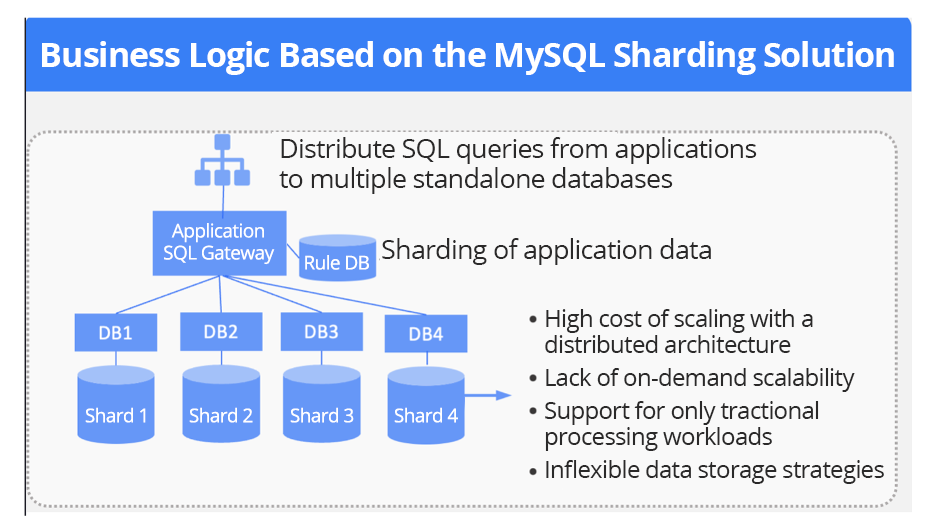
<style>
.page{position:relative;width:936px;height:518px;background:#f9f9f9}
.page>*{position:absolute;margin:0}
.t1{font:34px "OpenSans-Bold";letter-spacing:-0.03em;color:#ffffff}
.t2{font:27px/30px "OpenSans";letter-spacing:-0.03em;color:#2a2929}
.t3{font:19px/22px "OpenSans";letter-spacing:-0.03em;color:#ffffff}
.t4{font:27px "OpenSans";letter-spacing:-0.03em;color:#2a2929}
.t5{font:19px "OpenSans";letter-spacing:-0.03em;color:#ffffff}
.t6{font:24px/26px "OpenSans";letter-spacing:-0.03em;color:#2a2929}
</style>
<div class="page">
<p class="t1" style="left:42px;top:41px;width:852px;height:34px">Business Logic Based on the MySQL Sharding Solution</p>
<p class="t2" style="left:279px;top:137px;width:478px;height:57px">Distribute SQL queries from applications to multiple standalone databases</p>
<p class="t3" style="left:164px;top:223px;width:111px;height:42px;text-align:center">Application SQL Gateway</p>
<p class="t4" style="left:382px;top:238px;width:329px;height:27px">Sharding of application data</p>
<p class="t5" style="left:305px;top:255px;width:64px;height:15px">Rule DB</p>
<p class="t6" style="left:545px;top:309px;width:339px;height:175px">High cost of scaling with a distributed architecture<br>Lack of on-demand scalability<br>Support for only tractional processing workloads<br>Inflexible data storage strategies</p>
<p class="t5" style="left:85px;top:407px;width:61px;height:16px">Shard 1</p>
<p class="t5" style="left:189px;top:407px;width:64px;height:16px">Shard 2</p>
<p class="t5" style="left:290px;top:407px;width:64px;height:16px">Shard 3</p>
<p class="t5" style="left:394px;top:407px;width:64px;height:16px">Shard 4</p>
</div>
